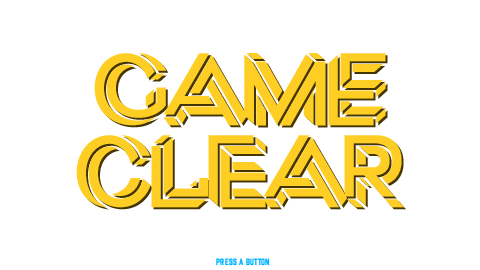
<style>
.page{position:relative;width:480px;height:270px;background:#ffffff}
.page>*{position:absolute;margin:0}
.t1{font:100px "Macula-Solid";letter-spacing:-0.12em;color:#ffce25}
.t2{font:8.3px "Prohibition-Regular";letter-spacing:0.02em;color:#00b4ff}
.t3{font:8.3px "Prohibition-Regular";letter-spacing:0.06em;color:#00b4ff}
</style>
<div class="page">
<p class="t1" style="left:94px;top:53px;width:292px;height:73px">GAME</p>
<p class="t1" style="left:96px;top:55px;width:292px;height:73px">GAME</p>
<p class="t1" style="left:76px;top:135px;width:328px;height:73px">CLEAR</p>
<p class="t1" style="left:78px;top:137px;width:328px;height:73px">CLEAR</p>
<p class="t2" style="left:216px;top:258px;width:54px;height:8px"><span class="t3">PRESS </span>A BUTTON</p>
</div>
